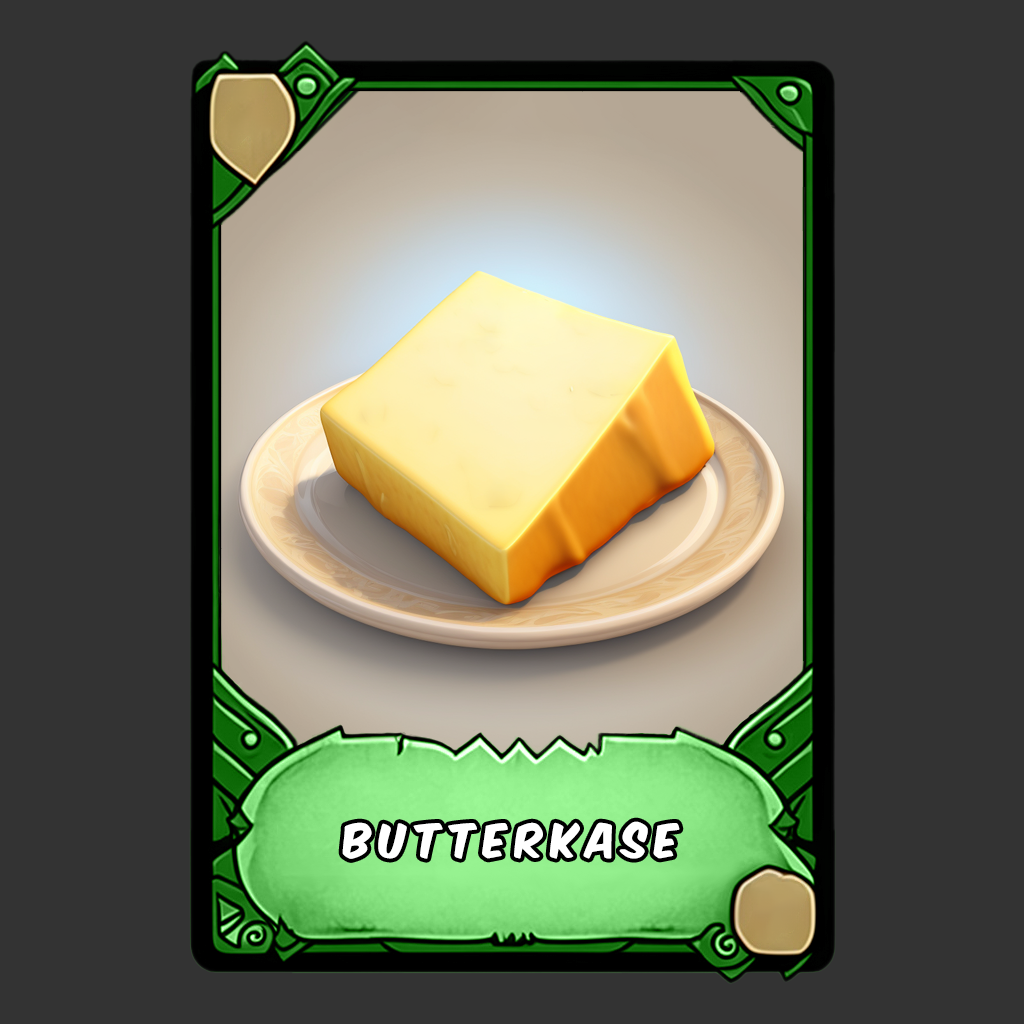
<style>
.page{position:relative;width:1024px;height:1024px;background:#333333}
.page>*{position:absolute;margin:0}
.t1{font:40px "KomikaAxis";letter-spacing:0.2em;color:#ffffff}
</style>
<div class="page">
<p class="t1" style="left:342px;top:821px;width:338px;height:38px">butterkase</p>
</div>
